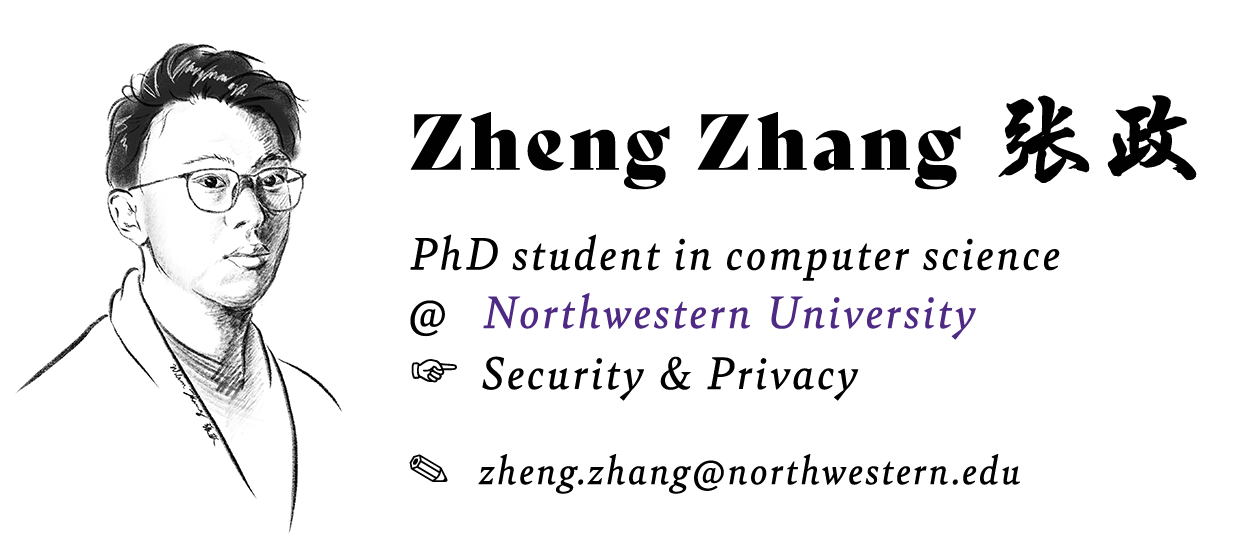
<style>
.page{position:relative;width:1259px;height:540px;background:#ffffff}
.page>*{position:absolute;margin:0}
.t1{font:76.5px "BelyDisplay-Regular";letter-spacing:0.04em;color:#010101;font-weight:bold}
.t2{font:100.4px "HYChengXingJ";letter-spacing:0.04em;color:#010101;font-weight:bold}
.t3{font:48.1px/58.3px "Bely-Italic";letter-spacing:0.04em;color:#010101;font-weight:bold}
.t4{font:48.1px/58.3px "Bely-Italic";letter-spacing:0.04em;color:#4e2a84;font-weight:bold}
.t5{font:48.1px/58.3px "HiraKakuPro-W3";letter-spacing:0.04em;color:#010101;font-weight:bold}
.t6{font:41.3px "Bely-Italic";letter-spacing:0.04em;color:#010101;font-weight:bold}
.t7{font:45.4px "ZapfDingbatsITC";letter-spacing:0.04em;color:#010101;font-weight:bold}
</style>
<div class="page">
<p class="t1" style="left:410px;top:95px;width:787px;height:95px">Zheng Zhang <span class="t2">张政</span></p>
<p class="t3" style="left:410px;top:234px;width:650px;height:167px">PhD student in computer science <br>@   <span class="t4">Northwestern University<br></span><span class="t5">☞ </span>Security &amp; Privacy</p>
<p class="t6" style="left:409px;top:454px;width:611px;height:40px"><span class="t7">✎  </span>zheng.zhang@northwestern.edu</p>
</div>
